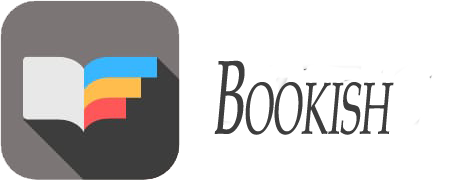
<style>
.page{position:relative;width:451px;height:185px;background:#ffffff}
.page>*{position:absolute;margin:0}
.t1{font:180px "BookAntiqua";color:#3d3d3d;font-variant:small-caps;font-style:italic;scale:0.5 1}
</style>
<div class="page">
<p class="t1" style="left:214px;top:60px;width:180px;height:75px">Bookish</p>
</div>
